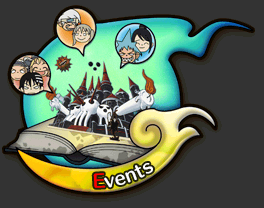
<style>
.page{position:relative;width:264px;height:208px;background:#333333}
.page>*{position:absolute;margin:0}
.t1{font:17px "HummingStd-B";letter-spacing:0.025em;color:#ffffff}
.t2{font:17px "HummingStd-B";letter-spacing:0.025em;color:#ff0000}
.t3{font:17px "HummingStd-B";letter-spacing:0.05em;color:#ffffff}
</style>
<div class="page">
<p class="t1" style="left:93px;top:163px;width:60px;height:25px;rotate:-5deg"><span class="t2">E</span>ven<span class="t3">ts</span></p>
</div>
